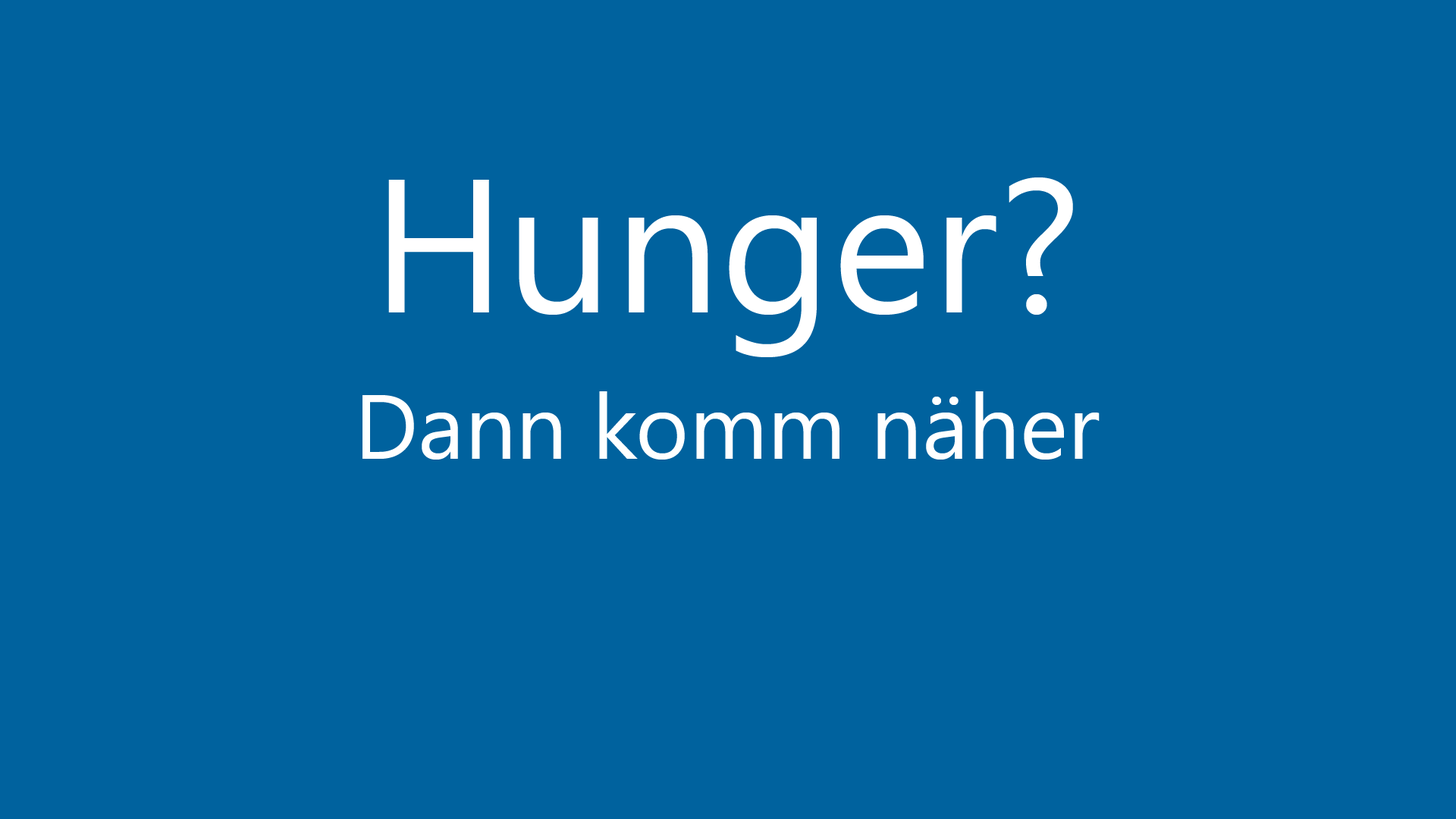
<style>
.page{position:relative;width:1456px;height:819px;background:#00629e}
.page>*{position:absolute;margin:0}
.t1{font:189.6px "SegoeUI";color:#ffffff}
.t2{font:91px "SegoeUI";color:#ffffff}
</style>
<div class="page">
<p class="t1" style="left:388px;top:177px;width:685px;height:180px">Hunger?</p>
<p class="t2" style="left:362px;top:391px;width:738px;height:69px">Dann komm näher</p>
</div>
